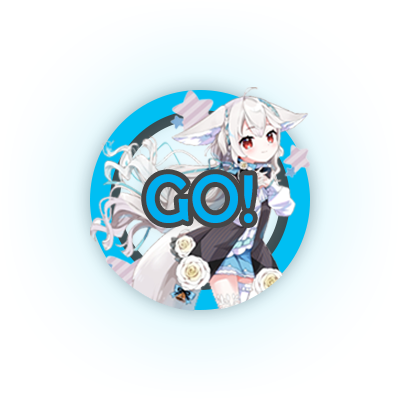
<style>
.page{position:relative;width:400px;height:400px}
.page>*{position:absolute;margin:0}
.t1{font:68.3px "BerlinSansFB-Reg";color:#00aeef}
</style>
<div class="page">
<p class="t1" style="left:146px;top:174px;width:107px;height:49px">GO!</p>
</div>
